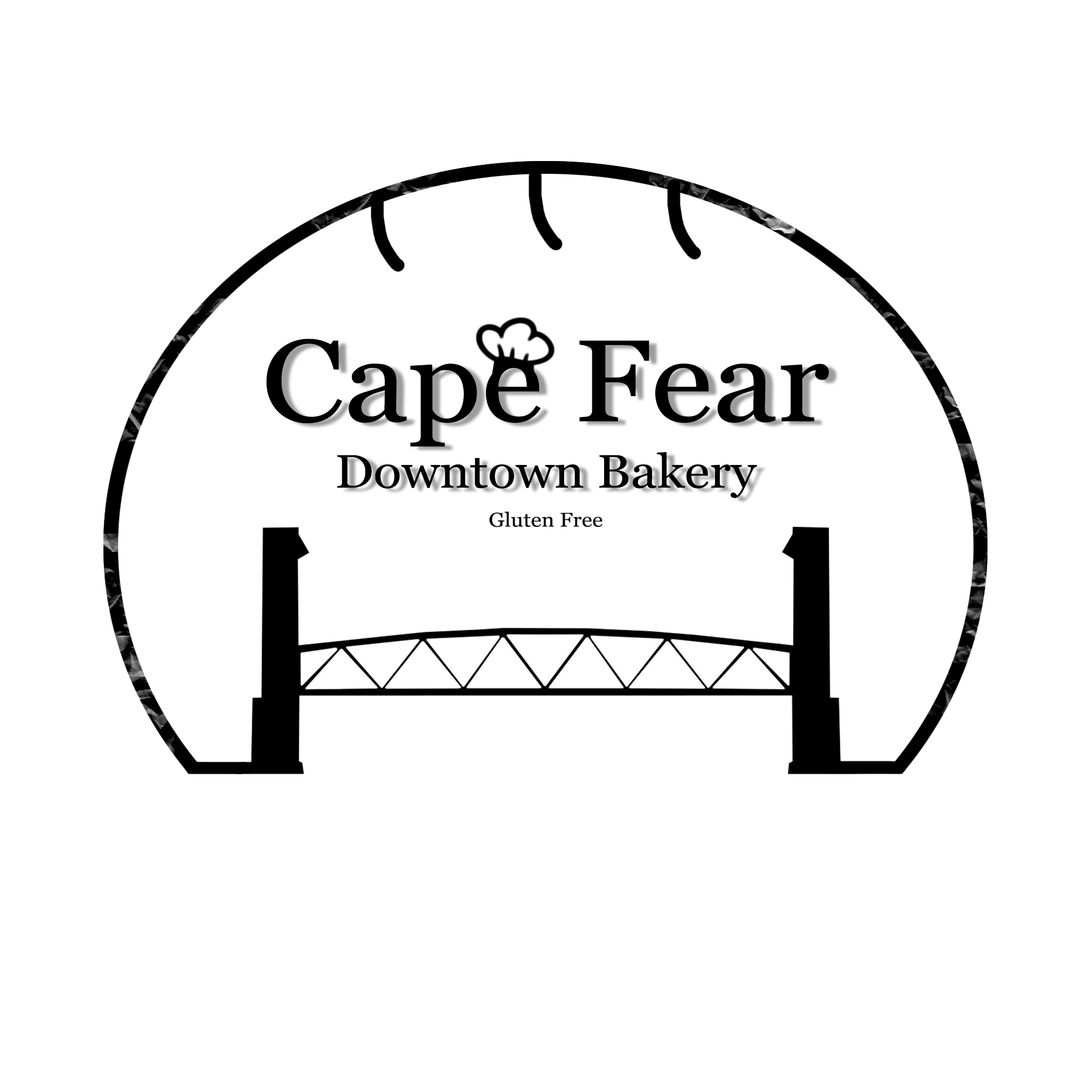
<style>
.page{position:relative;width:1092px;height:1092px;background:#ffffff}
.page>*{position:absolute;margin:0}
.t1{font:116.5px "Georgia";color:#000000;scale:1.1 1}
.t2{font:47.1px "Georgia";color:#000000;scale:1.1 1}
.t3{font:19.9px "Georgia";color:#000000;scale:1.1 1}
</style>
<div class="page">
<p class="t1" style="left:266px;top:339px;width:563px;height:108px">Cape Fear</p>
<p class="t2" style="left:337px;top:452px;width:420px;height:46px">Downtown Bakery</p>
<p class="t3" style="left:489px;top:511px;width:114px;height:16px">Gluten Free</p>
</div>
